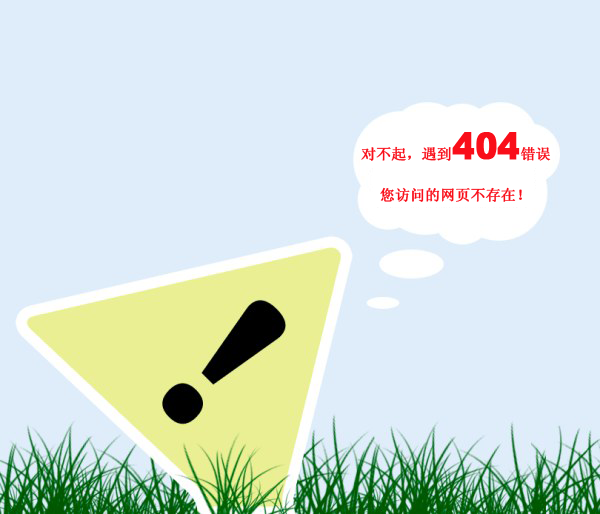
<style>
.page{position:relative;width:600px;height:514px;background:#dfedfa}
.page>*{position:absolute;margin:0}
.t1{font:14.7px "SimSun";color:#f90e19;font-weight:bold}
.t2{font:36.7px "Arial-Black";color:#f90e19;font-weight:bold;scale:0.9 1}
</style>
<div class="page">
<p class="t1" style="left:361px;top:132px;width:190px;height:29px">对不起，遇到<span class="t2">404</span>错误</p>
<p class="t1" style="left:380px;top:187px;width:142px;height:15px">您访问的网页不存在！</p>
</div>
